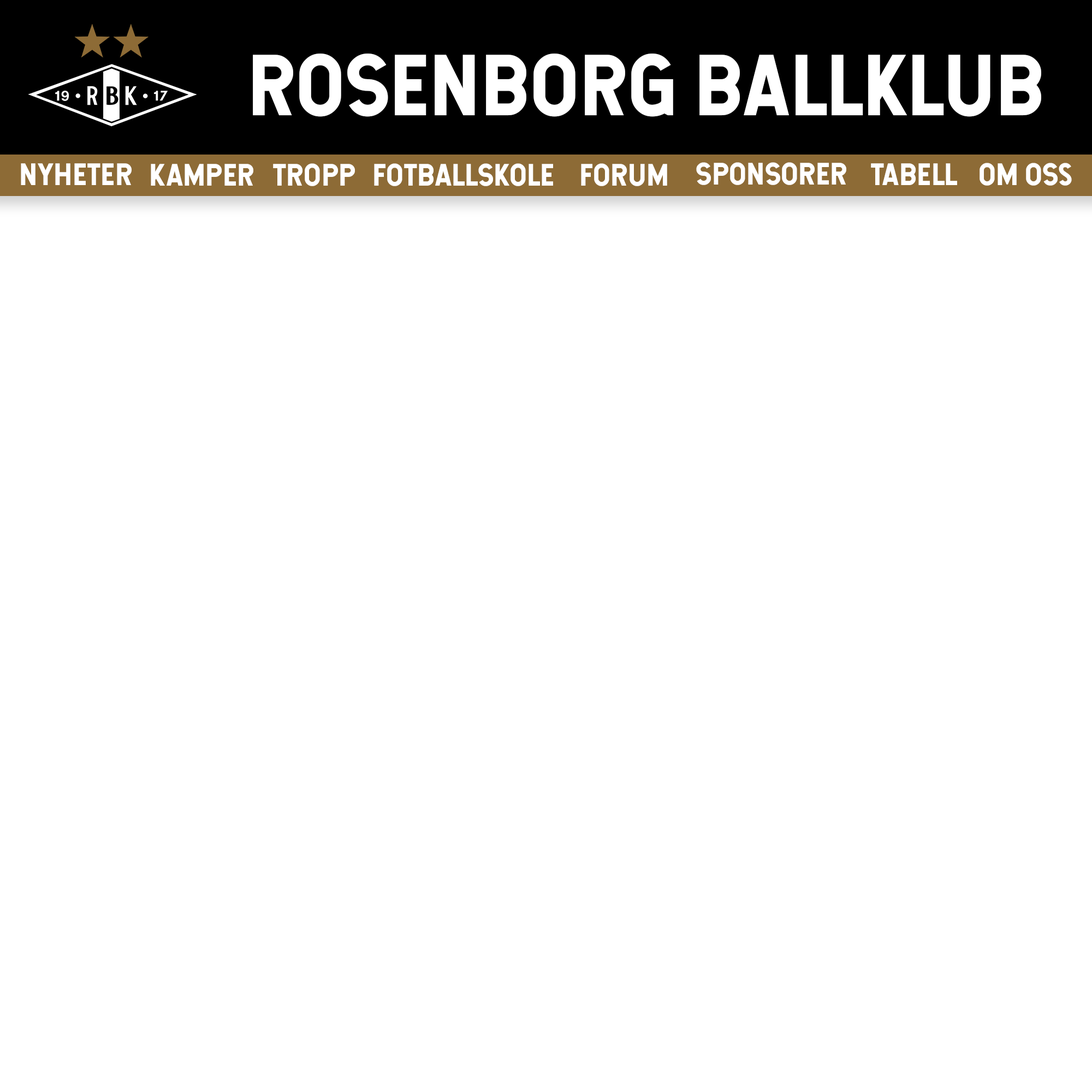
<style>
.page{position:relative;width:1092px;height:1092px;background:#ffffff}
.page>*{position:absolute;margin:0}
.t1{font:82.5px "Hansief";letter-spacing:0.02em;color:#ffffff}
.t2{font:29.6px "Hansief";letter-spacing:0.02em;color:#ffffff}
</style>
<div class="page">
<p class="t1" style="left:253px;top:54px;width:788px;height:63px">ROSENBORG BALLKLUB</p>
<p class="t2" style="left:21px;top:163px;width:111px;height:22px">Nyheter</p>
<p class="t2" style="left:151px;top:164px;width:102px;height:22px">KAMPER</p>
<p class="t2" style="left:273px;top:163px;width:82px;height:23px">TROPP</p>
<p class="t2" style="left:374px;top:163px;width:179px;height:23px">FOTBALLSKOLE</p>
<p class="t2" style="left:581px;top:163px;width:86px;height:23px">FORUM</p>
<p class="t2" style="left:696px;top:162px;width:150px;height:23px">SPONSORER</p>
<p class="t2" style="left:871px;top:163px;width:86px;height:22px">TABELL</p>
<p class="t2" style="left:980px;top:163px;width:92px;height:23px">OM OSs</p>
</div>
